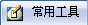
<style>
.page{position:relative;width:88px;height:25px}
.page>*{position:absolute;margin:0}
.t1{font:12px "SimSun";color:#000103}
</style>
<div class="page">
<p class="t1" style="left:32px;top:6px;width:47px;height:11px">常用工具</p>
</div>
